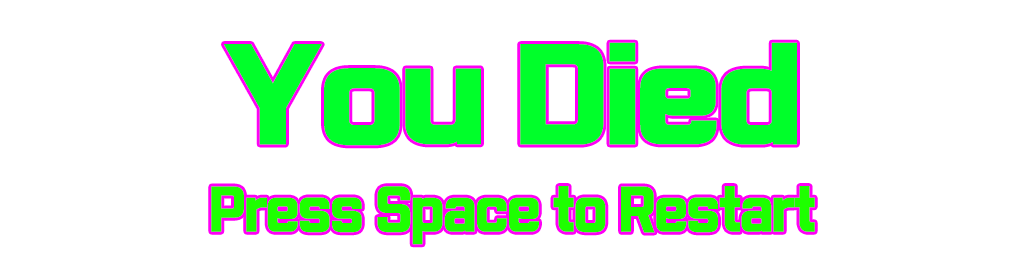
<style>
.page{position:relative;width:1024px;height:256px;background:#ffffff}
.page>*{position:absolute;margin:0}
.t1{font:125px "Typo_SsangmunDong_B";letter-spacing:-0.033em;color:#00ff2a}
.t2{font:56.5px "Typo_SsangmunDong_B";letter-spacing:-0.033em;color:#1eff00;scale:0.88 1}
</style>
<div class="page">
<p class="t1" style="left:224px;top:42px;width:573px;height:104px">You Died</p>
<p class="t2" style="left:211px;top:186px;width:604px;height:59px">Press Space to Restart</p>
</div>
